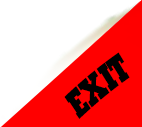
<style>
.page{position:relative;width:142px;height:127px;background:#ffffff}
.page>*{position:absolute;margin:0}
.t1{font:38.8px "Rockwell-ExtraBold";color:#000000;scale:0.56 1}
</style>
<div class="page">
<p class="t1" style="left:64px;top:52px;width:66px;height:67px;rotate:-39deg">EXIT</p>
</div>
